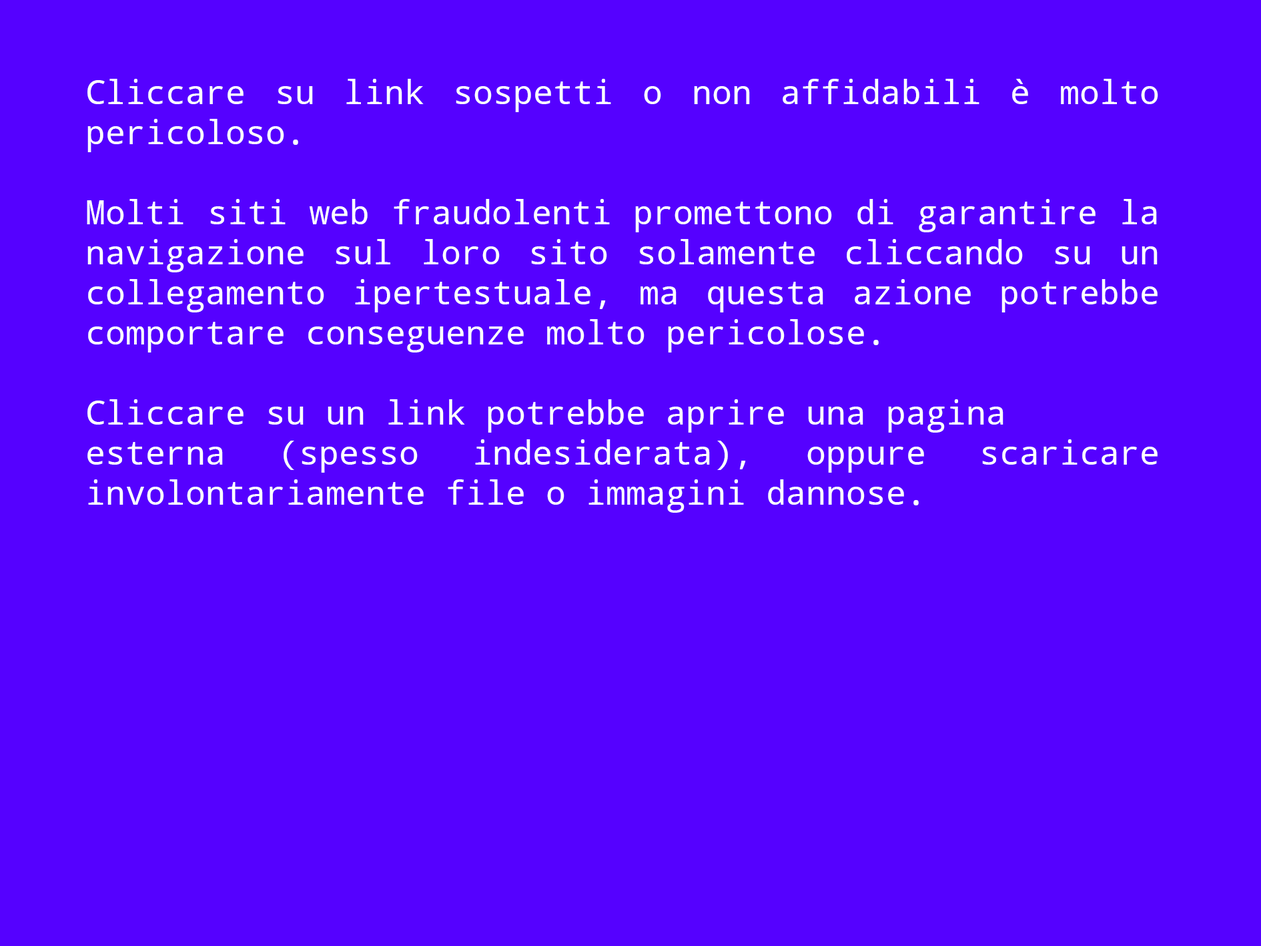
<style>
.page{position:relative;width:1261px;height:946px;background:#5501ff}
.page>*{position:absolute;margin:0}
.t1{font:33.4px "NotoMono";color:#ffffff}
</style>
<div class="page">
<p class="t1" style="left:87px;top:79px;width:1071px;height:433px;text-align:justify">Cliccare su link sospetti o non affidabili è molto pericoloso. <br><br>Molti siti web fraudolenti promettono di garantire la navigazione sul loro sito solamente cliccando su un collegamento ipertestuale, ma questa azione potrebbe comportare conseguenze molto pericolose.<br><br>Cliccare su un link potrebbe aprire una pagina <br>esterna (spesso indesiderata), oppure scaricare involontariamente file o immagini dannose.</p>
</div>
